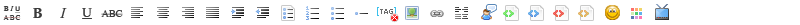
<style>
.page{position:relative;width:800px;height:25px;background:#ffffff}
.page>*{position:absolute;margin:0}
.t1{font:9px "Aparajita-Bold";color:#3b3b3b}
.t2{font:9px "Aparajita-Italic";color:#3b3b3b}
.t3{font:6px "Small Fonts";color:#3b3b3b}
.t4{font:13px "Aparajita";letter-spacing:0.1em;color:#3b3b3b;font-variant:small-caps}
.t5{font:18px "Aparajita-Bold";color:#3b3b3b}
.t6{font:18px "Aparajita-Italic";color:#3b3b3b}
.t7{font:17px "Aparajita";color:#3b3b3b}
.t8{font:18px "Aparajita";color:#3b3b3b;font-variant:small-caps}
.t9{font:10px "Small Fonts";color:#6b6b6b;font-variant:small-caps}
.t10{font:10px "Small Fonts";color:#3bc1ed}
</style>
<div class="page">
<p class="t1" style="left:3px;top:6px;width:6px;height:5px">B</p>
<p class="t2" style="left:10px;top:6px;width:4px;height:5px">I</p>
<p class="t3" style="left:15px;top:6px;width:5px;height:5px">U</p>
<p class="t4" style="left:3px;top:15px;width:18px;height:5px">abc</p>
<p class="t5" style="left:33px;top:8px;width:9px;height:10px">B</p>
<p class="t6" style="left:60px;top:8px;width:7px;height:10px">I</p>
<p class="t7" style="left:82px;top:8px;width:10px;height:9px">U</p>
<p class="t8" style="left:101px;top:10px;width:22px;height:7px">abc</p>
<p class="t9" style="left:377px;top:7px;width:19px;height:9px"><span class="t10">[</span>tag<span class="t10">]</span></p>
</div>
